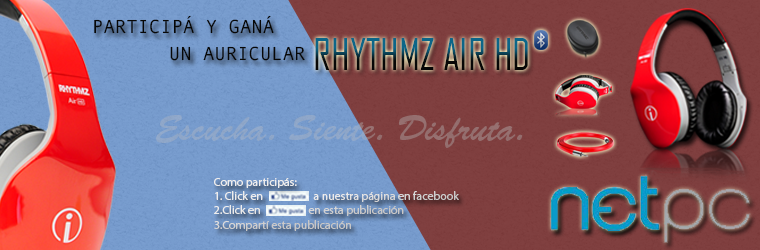
<style>
.page{position:relative;width:760px;height:250px}
.page>*{position:absolute;margin:0}
.t1{font:19px "AndaleMono";color:#070706}
.t2{font:42px "AgencyFB-Reg"}
.t3{font:35px "BrushScriptStd"}
.t4{font:11.9px "MyriadPro-Regular"}
</style>
<div class="page">
<p class="t1" style="left:94px;top:15px;width:180px;height:19px">PARTICIPÁ Y GANÁ</p>
<p class="t2" style="left:315px;top:38px;width:213px;height:32px">RHYTHMZ AIR HD</p>
<p class="t1" style="left:170px;top:46px;width:135px;height:15px">UN AURICULAR</p>
<p class="t3" style="left:156px;top:115px;width:367px;height:33px">Escucha. Siente. Disfruta.</p>
<p class="t4" style="left:214px;top:178px;width:245px;height:53px">Como participás:<br>1. Click en                    a nuestra página en facebook<br>2.Click en                   en esta publicación<br>3.Compartí esta publicación</p>
</div>
